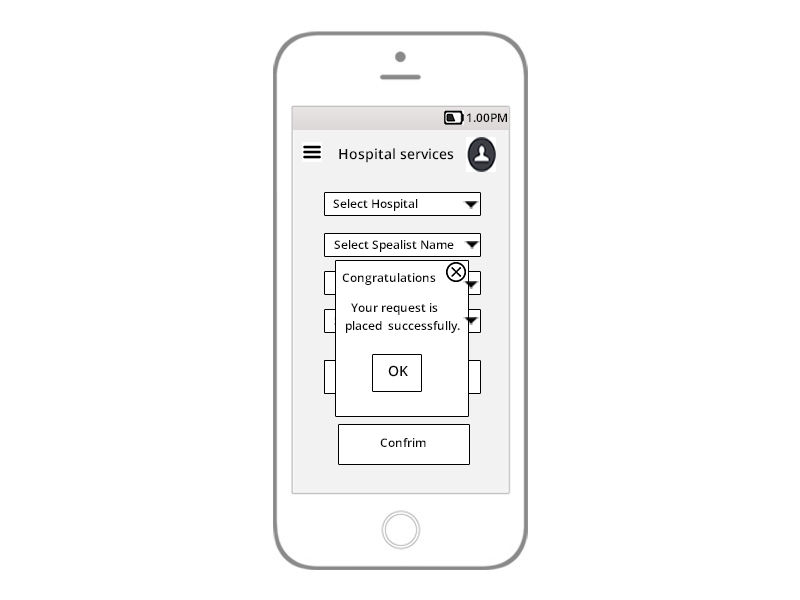
<style>
.page{position:relative;width:800px;height:600px;background:#ffffff}
.page>*{position:absolute;margin:0}
.t1{font:12px "OpenSans-Semibold";color:#090909}
.t2{font:14px "OpenSans-Semibold";color:#090909}
.t3{font:12px/6px "OpenSans-Semibold";color:#090909}
</style>
<div class="page">
<p class="t1" style="left:467px;top:113px;width:40px;height:9px"><span class="t2">                                         </span>1.00PM</p>
<p class="t2" style="left:339px;top:148px;width:115px;height:15px">Hospital services</p>
<p class="t1" style="left:333px;top:199px;width:85px;height:12px"><span class="t2">  <br> </span> Select Hospital</p>
<p class="t1" style="left:334px;top:240px;width:120px;height:12px">Select Spealist Name</p>
<p class="t3" style="left:342px;top:273px;width:118px;height:60px">Congratulations<br><br>   <br>    <br><br>     Your request is<br><br><br>   placed  successfully.</p>
<p class="t2" style="left:388px;top:365px;width:20px;height:12px"><span class="t1"><br><br>   </span>OK</p>
<p class="t1" style="left:380px;top:438px;width:46px;height:9px">Confrim</p>
</div>
